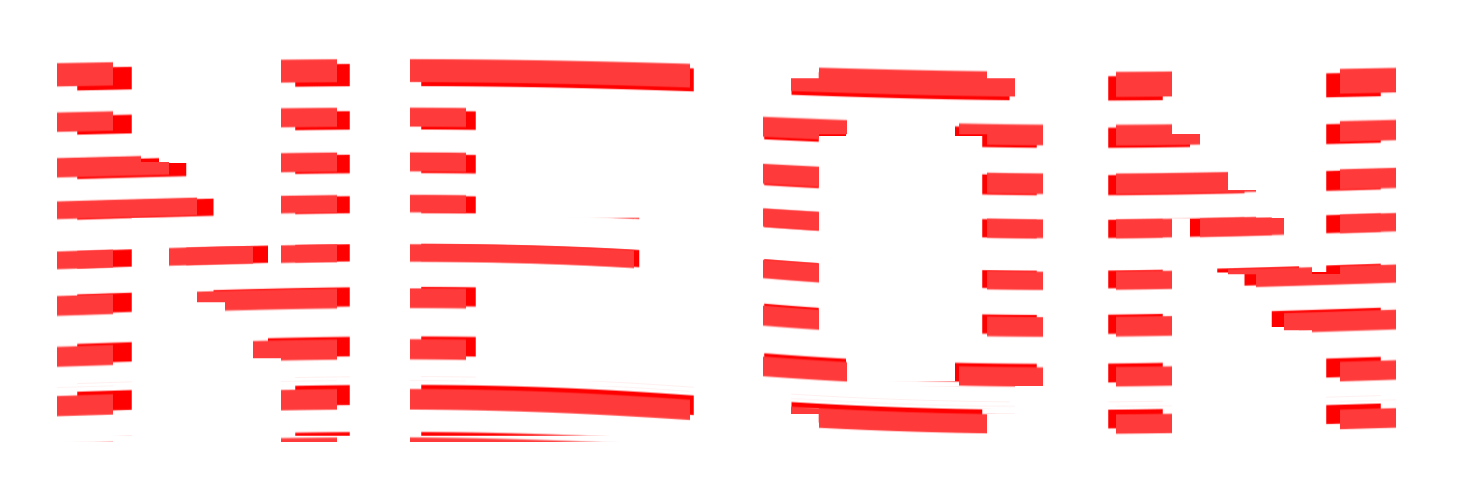
<style>
.page{position:relative;width:1471px;height:492px;background:#ffffff}
.page>*{position:absolute;margin:0}
.t1{font:573.3px "VCROSDMono";letter-spacing:0.03em}
.t2{font:558px "VCROSDMono";letter-spacing:0.03em}
</style>
<div class="page">
<p class="t1" style="left:57px;top:50px;width:1339px;height:392px">NEON</p>
<p class="t2" style="left:77px;top:54px;width:1304px;height:382px">NEON</p>
</div>
